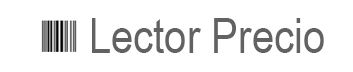
<style>
.page{position:relative;width:353px;height:72px;background:#ffffff}
.page>*{position:absolute;margin:0}
.t1{font:49px "ArialNarrow";color:#626262}
</style>
<div class="page">
<p class="t1" style="left:92px;top:18px;width:232px;height:35px">Lector Precio</p>
</div>
